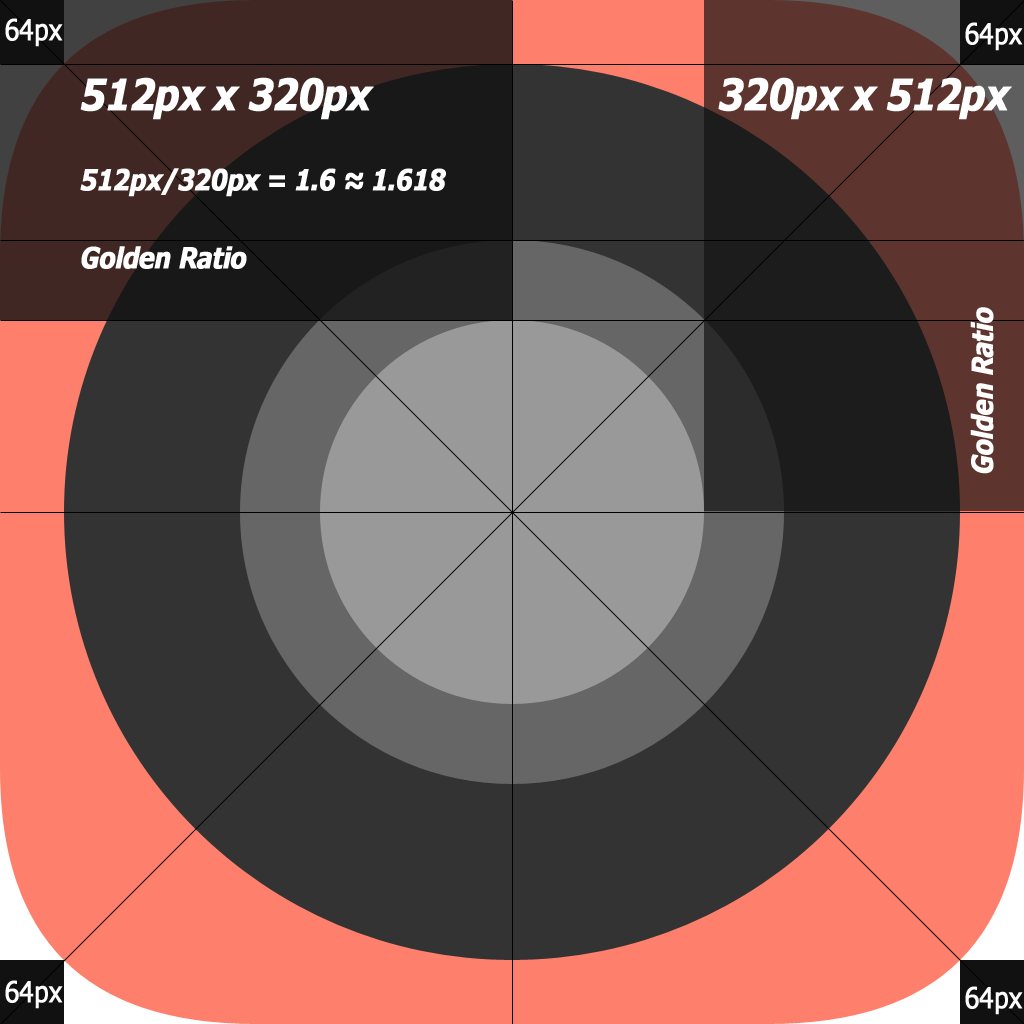
<style>
.page{position:relative;width:1024px;height:1024px;background:#333333}
.page>*{position:absolute;margin:0}
.t1{font:28.8px "Verdana";letter-spacing:-0.05em;color:#ffffff;font-weight:bold;scale:0.83 1}
.t2{font:43.2px "Verdana-BoldItalic";letter-spacing:-0.05em;color:#ffffff;font-weight:bold;scale:0.83 1}
.t3{font:28.8px "Verdana-BoldItalic";letter-spacing:-0.05em;color:#ffffff;font-weight:bold;scale:0.83 1}
</style>
<div class="page">
<p class="t1" style="left:5px;top:18px;width:58px;height:29px">64px</p>
<p class="t1" style="left:965px;top:22px;width:58px;height:29px">64px</p>
<p class="t2" style="left:80px;top:77px;width:294px;height:43px">512px x 320px</p>
<p class="t2" style="left:718px;top:77px;width:294px;height:43px">320px x 512px</p>
<p class="t3" style="left:80px;top:168px;width:366px;height:29px">512px/320px = 1.6 ≈ 1.618</p>
<p class="t3" style="left:81px;top:246px;width:166px;height:23px">Golden Ratio</p>
<p class="t3" style="left:970px;top:307px;width:24px;height:167px;rotate:-90deg">Golden Ratio</p>
<p class="t1" style="left:5px;top:980px;width:58px;height:29px">64px</p>
<p class="t1" style="left:965px;top:986px;width:58px;height:29px">64px</p>
</div>
